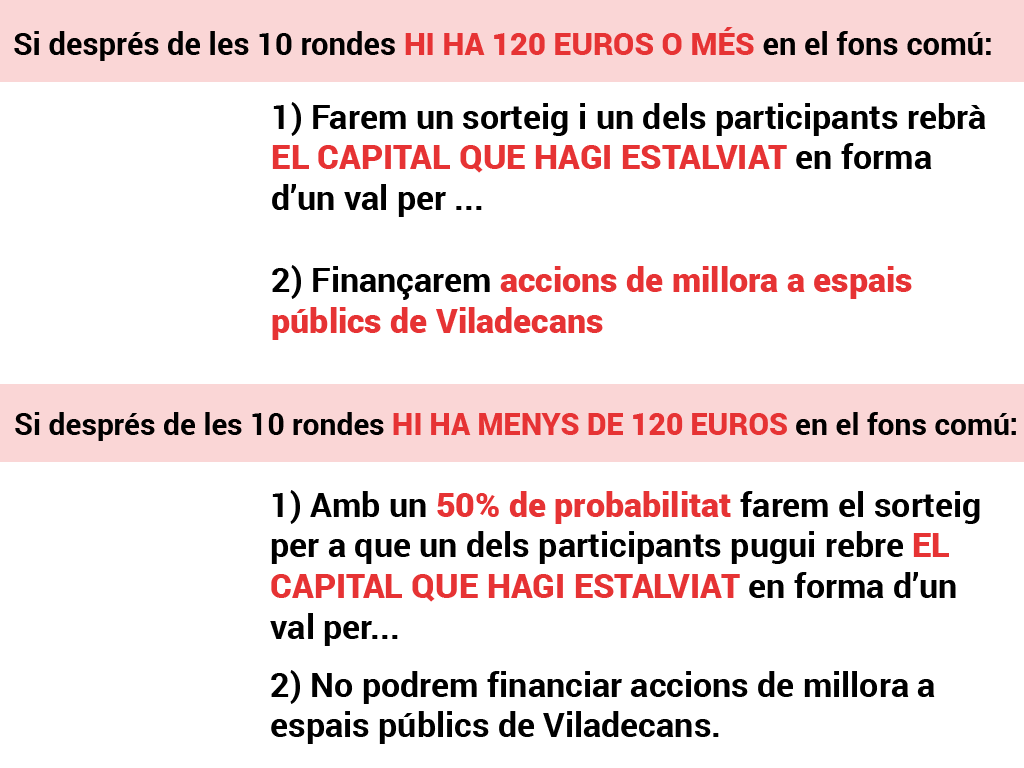
<style>
.page{position:relative;width:1024px;height:768px;background:#ffffff}
.page>*{position:absolute;margin:0}
.t1{font:31px "Roboto-Bold";color:#000000}
.t2{font:31px "Roboto-Black";color:#e63334}
.t3{font:34px "Roboto-Black";color:#e63334}
.t4{font:34px "Roboto-Bold";color:#000000}
.t5{font:30px "Roboto-Bold";color:#000000}
.t6{font:30px "Roboto-Black";color:#e63334}
</style>
<div class="page">
<p class="t1" style="left:14px;top:27px;width:977px;height:34px">Si després de les 10 rondes <span class="t2">HI HA 120 EUROS O MÉS </span>en el fons comú:</p>
<p class="t3" style="left:272px;top:102px;width:714px;height:238px"><span class="t4">1) Farem un sorteig i un dels participants rebrà<br></span>EL CAPITAL QUE HAGI ESTALVIAT <span class="t4">en forma <br>d’un val per ...<br><br>2) Finançarem </span>accions de millora a espais <br>públics de Viladecans</p>
<p class="t5" style="left:15px;top:412px;width:1001px;height:29px">Si després de les 10 rondes <span class="t6">HI HA MENYS DE 120 EUROS </span>en el fons comú:</p>
<p class="t4" style="left:270px;top:490px;width:710px;height:254px">1) Amb un <span class="t3">50% de probabilitat </span>farem el sorteig<br>per a que un dels participants pugui rebre <span class="t3">EL <br>CAPITAL QUE HAGI ESTALVIAT </span>en forma d’un <br>val per...<br><br>2) No podrem financiar accions de millora a<br>espais públics de Viladecans.</p>
</div>
